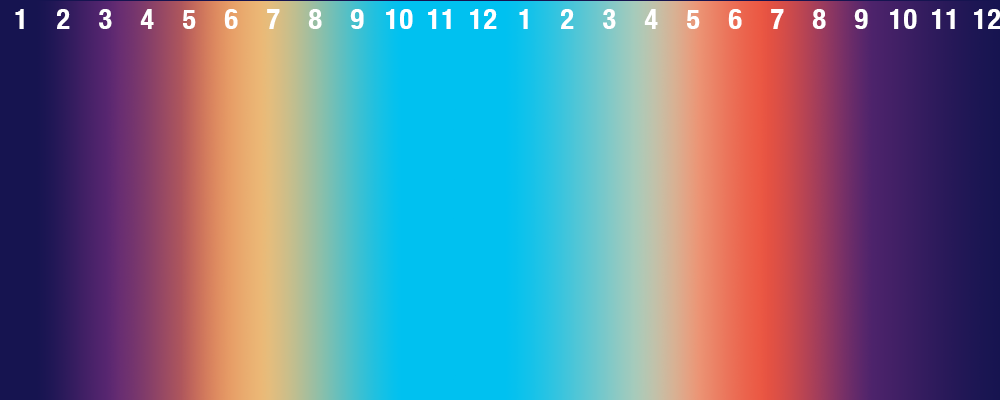
<style>
.page{position:relative;width:1000px;height:400px}
.page>*{position:absolute;margin:0}
.t1{font:27.9px "HelveticaNeue-CondensedBold";letter-spacing:0.04em;color:#ffffff;text-transform:uppercase}
</style>
<div class="page">
<p class="t1" style="left:15px;top:9px;width:9px;height:20px">1</p>
<p class="t1" style="left:57px;top:9px;width:13px;height:20px">2</p>
<p class="t1" style="left:99px;top:9px;width:13px;height:20px">3</p>
<p class="t1" style="left:140px;top:9px;width:14px;height:20px">4</p>
<p class="t1" style="left:183px;top:10px;width:13px;height:19px">5</p>
<p class="t1" style="left:224px;top:9px;width:14px;height:20px">6</p>
<p class="t1" style="left:267px;top:9px;width:13px;height:20px">7</p>
<p class="t1" style="left:308px;top:9px;width:14px;height:20px">8</p>
<p class="t1" style="left:350px;top:9px;width:14px;height:20px">9</p>
<p class="t1" style="left:386px;top:9px;width:27px;height:20px">10</p>
<p class="t1" style="left:428px;top:9px;width:23px;height:20px">11</p>
<p class="t1" style="left:470px;top:9px;width:27px;height:20px">12</p>
<p class="t1" style="left:519px;top:9px;width:9px;height:20px">1</p>
<p class="t1" style="left:561px;top:9px;width:13px;height:20px">2</p>
<p class="t1" style="left:603px;top:9px;width:13px;height:20px">3</p>
<p class="t1" style="left:644px;top:9px;width:14px;height:20px">4</p>
<p class="t1" style="left:687px;top:10px;width:13px;height:19px">5</p>
<p class="t1" style="left:728px;top:9px;width:14px;height:20px">6</p>
<p class="t1" style="left:771px;top:9px;width:13px;height:20px">7</p>
<p class="t1" style="left:812px;top:9px;width:14px;height:20px">8</p>
<p class="t1" style="left:854px;top:9px;width:14px;height:20px">9</p>
<p class="t1" style="left:890px;top:9px;width:27px;height:20px">10</p>
<p class="t1" style="left:932px;top:9px;width:23px;height:20px">11</p>
<p class="t1" style="left:974px;top:9px;width:27px;height:20px">12</p>
</div>
